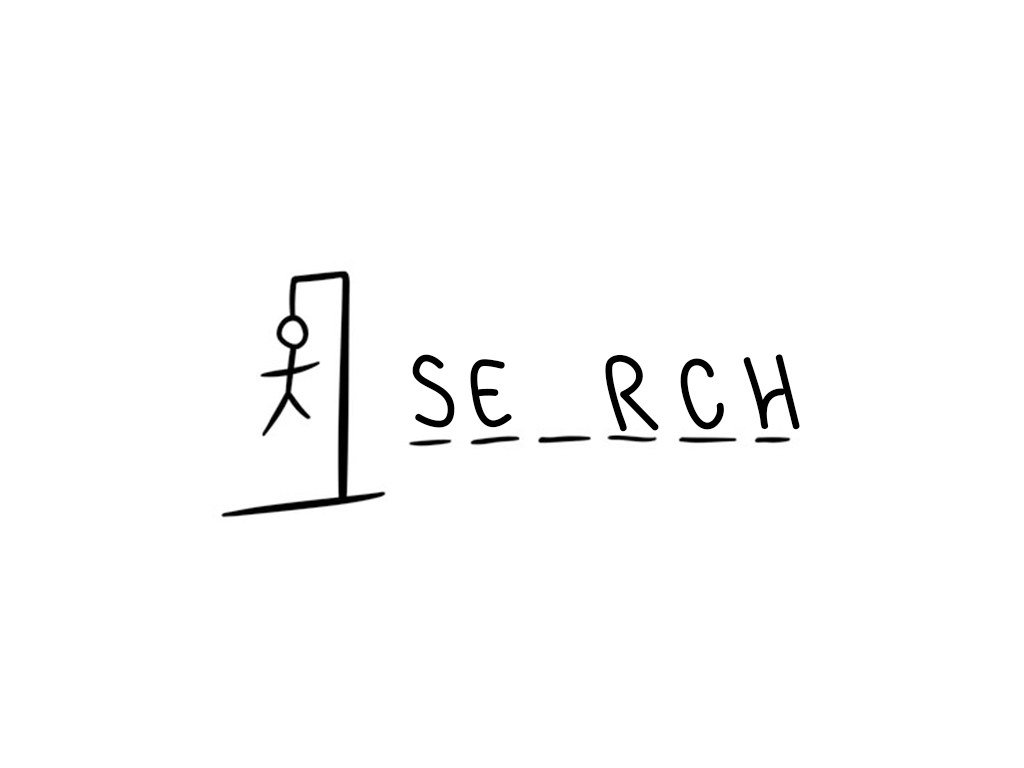
<style>
.page{position:relative;width:1024px;height:768px;background:#ffffff}
.page>*{position:absolute;margin:0}
.t1{font:105.3px "LoveislandSCAN4Regular";color:#000000}
</style>
<div class="page">
<p class="t1" style="left:412px;top:354px;width:43px;height:74px">S</p>
<p class="t1" style="left:470px;top:359px;width:42px;height:69px">E</p>
<p class="t1" style="left:605px;top:354px;width:54px;height:78px">R</p>
<p class="t1" style="left:680px;top:358px;width:44px;height:72px">C</p>
<p class="t1" style="left:743px;top:354px;width:57px;height:76px">H</p>
</div>
